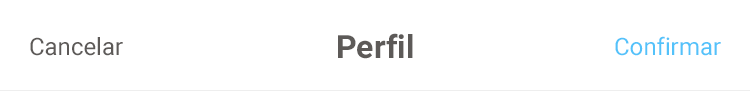
<style>
.page{position:relative;width:750px;height:91px;background:#ffffff}
.page>*{position:absolute;margin:0}
.t1{font:24px "Roboto-Regular";color:#5d5a58}
.t2{font:32px "Roboto-Bold";color:#5d5a58}
.t3{font:24px "Roboto-Regular";color:#53c2fa}
</style>
<div class="page">
<p class="t1" style="left:30px;top:37px;width:93px;height:19px">Cancelar</p>
<p class="t2" style="left:338px;top:33px;width:75px;height:26px">Perfil</p>
<p class="t3" style="left:615px;top:36px;width:106px;height:20px">Confirmar</p>
</div>
